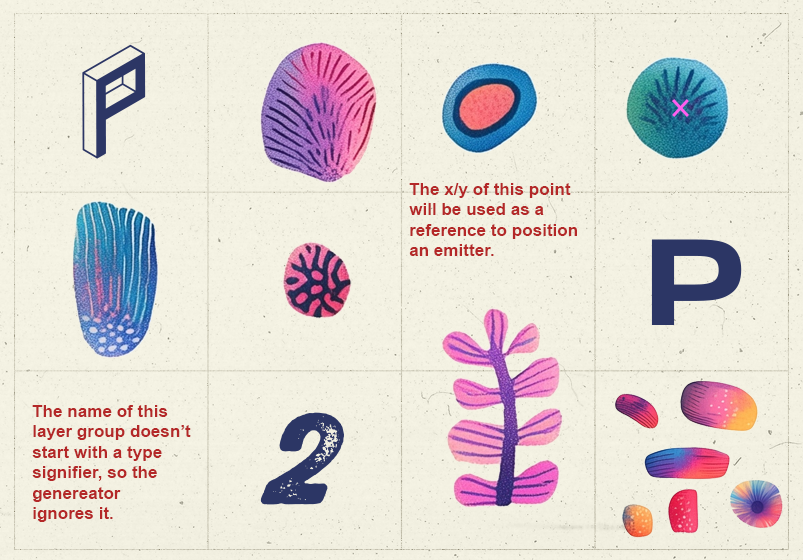
<style>
.page{position:relative;width:803px;height:560px}
.page>*{position:absolute;margin:0}
.t1{font:17.1px "Arial-BoldMT";color:#b42828}
</style>
<div class="page">
<p class="t1" style="left:409px;top:183px;width:168px;height:73px">The x/y of this point <br>will be used as a <br>reference to position <br>an emitter.</p>
<p class="t1" style="left:32px;top:405px;width:159px;height:117px">The name of this <br>layer group doesn’t <br>start with a type <br>signifier, so the <br>genereator <br>ignores it.</p>
</div>
